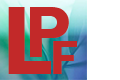
<style>
.page{position:relative;width:120px;height:80px;background:#c22929}
.page>*{position:absolute;margin:0}
.t1{font:100px "FranklinGothic-Demi";color:#c22929}
.t2{font:75px "FranklinGothic-Demi";color:#c22929}
.t3{font:50px "FranklinGothic-Demi";color:#c22929;text-transform:uppercase}
</style>
<div class="page">
<p class="t1" style="left:8px;top:7px;width:43px;height:67px">L</p>
<p class="t2" style="left:30px;top:7px;width:39px;height:50px">P</p>
<p class="t3" style="left:53px;top:41px;width:24px;height:33px">F</p>
</div>
